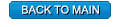
<style>
.page{position:relative;width:120px;height:27px;background:#ffffff}
.page>*{position:absolute;margin:0}
.t1{font:11px "ArialMT";color:#fffffe;text-transform:uppercase}
.t2{font:11px "ArialMT";text-transform:uppercase}
</style>
<div class="page">
<p class="t1" style="left:22px;top:5px;width:77px;height:9px">back to main</p>
<p class="t2" style="left:23px;top:6px;width:77px;height:9px">back to main</p>
</div>
